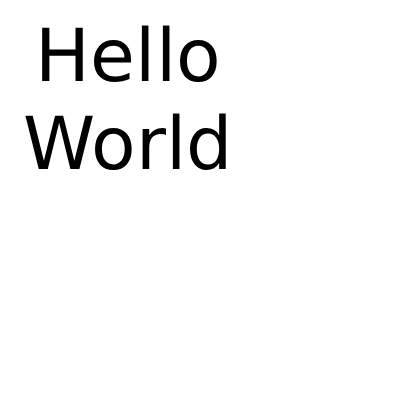
<style>
.page{position:relative;width:400px;height:400px;background:#ffffff}
.page>*{position:absolute;margin:0}
.t1{font:73px "DejaVuSans";color:#000000}
</style>
<div class="page">
<p class="t1" style="left:25px;top:25px;width:201px;height:146px;text-align:center">Hello<br>World</p>
</div>
